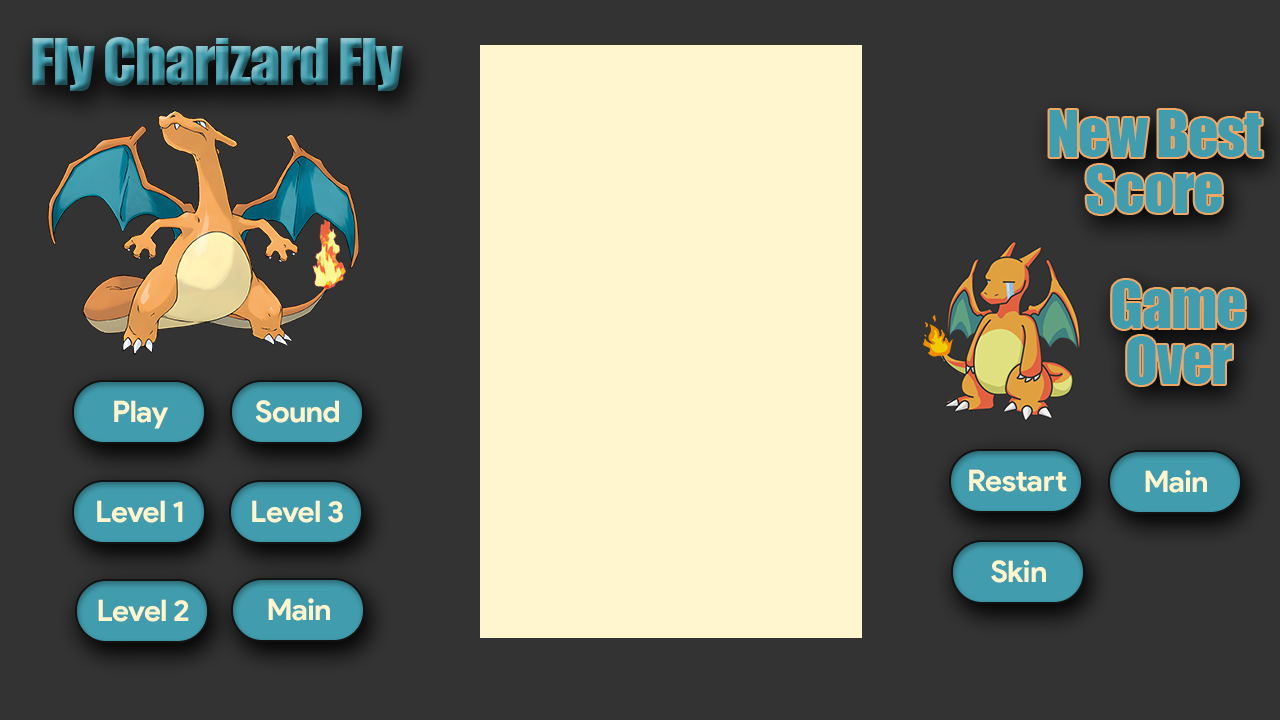
<style>
.page{position:relative;width:1280px;height:720px;background:#333333}
.page>*{position:absolute;margin:0}
.t1{font:60px "Impact";letter-spacing:-0.02em}
.t2{font:60px/56px "Impact";letter-spacing:-0.02em;color:#419dae}
.t3{font:29.7px "ProductSans-Bold";letter-spacing:-0.02em;color:#fff5cf}
</style>
<div class="page">
<p class="t1" style="left:32px;top:37px;width:371px;height:54px">Fly Charizard Fly</p>
<p class="t2" style="left:1049px;top:110px;width:214px;height:104px;text-align:center">New Best<br>Score</p>
<p class="t2" style="left:1112px;top:280px;width:133px;height:105px;text-align:center">Game<br>Over</p>
<p class="t3" style="left:114px;top:400px;width:55px;height:29px">Play</p>
<p class="t3" style="left:255px;top:400px;width:84px;height:23px">Sound</p>
<p class="t3" style="left:969px;top:469px;width:98px;height:23px">Restart</p>
<p class="t3" style="left:1145px;top:470px;width:62px;height:23px">Main</p>
<p class="t3" style="left:97px;top:500px;width:86px;height:23px">Level 1</p>
<p class="t3" style="left:252px;top:500px;width:91px;height:23px">Level 3</p>
<p class="t3" style="left:991px;top:560px;width:55px;height:23px">Skin</p>
<p class="t3" style="left:98px;top:599px;width:91px;height:23px">Level 2</p>
<p class="t3" style="left:268px;top:598px;width:62px;height:23px">Main</p>
</div>
